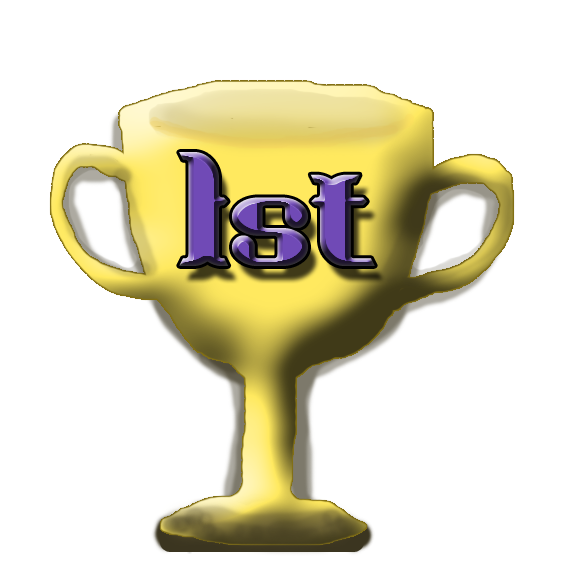
<style>
.page{position:relative;width:576px;height:576px;background:#ffffff}
.page>*{position:absolute;margin:0}
.t1{font:200px "BlackoninautBoldBRK"}
</style>
<div class="page">
<p class="t1" style="left:179px;top:152px;width:196px;height:114px">1st</p>
</div>
